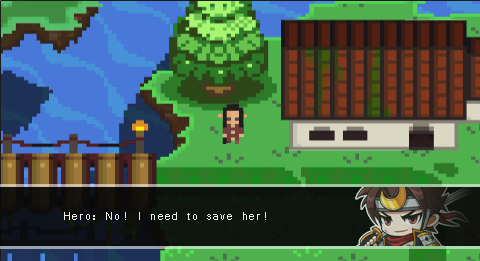
<style>
.page{position:relative;width:480px;height:261px}
.page>*{position:absolute;margin:0}
.t1{font:12px "Vrinda";letter-spacing:0.1em;color:#fefefe}
</style>
<div class="page">
<p class="t1" style="left:64px;top:212px;width:202px;height:8px;opacity:0.9">Hero: No! I need to save her!</p>
</div>
